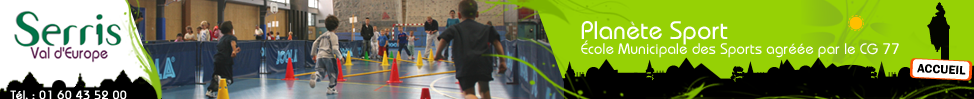
<style>
.page{position:relative;width:974px;height:99px;background:#96d105}
.page>*{position:absolute;margin:0}
.t1{font:25px "DynameSSK";color:#ffffff}
.t2{font:15px "DynameSSK";color:#ffffff}
.t3{font:11.8px "DynameSSK";color:#ffffff;font-weight:bold}
</style>
<div class="page">
<p class="t1" style="left:581px;top:21px;width:147px;height:24px">Planète Sport</p>
<p class="t2" style="left:581px;top:40px;width:318px;height:18px">École Municipale des Sports agréée par le CG 77</p>
<p class="t3" style="left:10px;top:90px;width:117px;height:10px">Tél. : 01 60 43 52 00</p>
</div>
